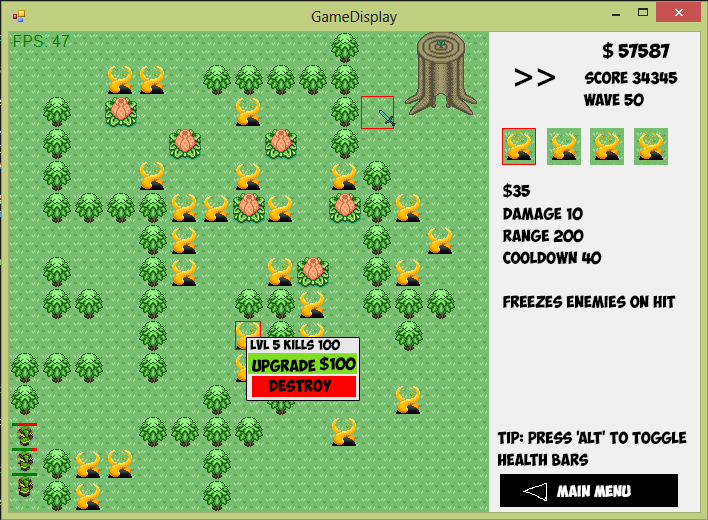
<style>
.page{position:relative;width:708px;height:520px;background:#77be70}
.page>*{position:absolute;margin:0}
.t1{font:14px "ObelixPro";color:#000000}
.t2{font:35.9px "MyriadPro-Bold";color:#000000}
.t3{font:12px "ObelixPro";color:#000000}
.t4{font:12px/22px "ObelixPro";color:#000000}
.t5{font:10px "ObelixPro";color:#000000}
.t6{font:11.3px "ObelixPro";color:#ffffff}
</style>
<div class="page">
<p class="t1" style="left:602px;top:42px;width:68px;height:17px">$ 57587</p>
<p class="t2" style="left:514px;top:68px;width:41px;height:19px;rotate:180deg">&lt;&lt;</p>
<p class="t3" style="left:584px;top:71px;width:94px;height:14px">Score 34345</p>
<p class="t3" style="left:583px;top:93px;width:61px;height:14px">wave 50</p>
<p class="t3" style="left:503px;top:183px;width:28px;height:15px">$35</p>
<p class="t4" style="left:503px;top:207px;width:173px;height:102px">damage 10<br>range 200<br>cooldown 40<br><br>Freezes enemies on hit</p>
<p class="t5" style="left:250px;top:339px;width:91px;height:12px">lvl 5 kills 100</p>
<p class="t3" style="left:252px;top:359px;width:64px;height:13px">Upgrade</p>
<p class="t3" style="left:319px;top:356px;width:37px;height:15px">$100</p>
<p class="t3" style="left:269px;top:379px;width:63px;height:14px">Destroy</p>
<p class="t4" style="left:497px;top:430px;width:190px;height:37px">tip: Press 'alt' to toggle<br>health bars</p>
<p class="t6" style="left:556px;top:485px;width:75px;height:13px">Main menu</p>
</div>
